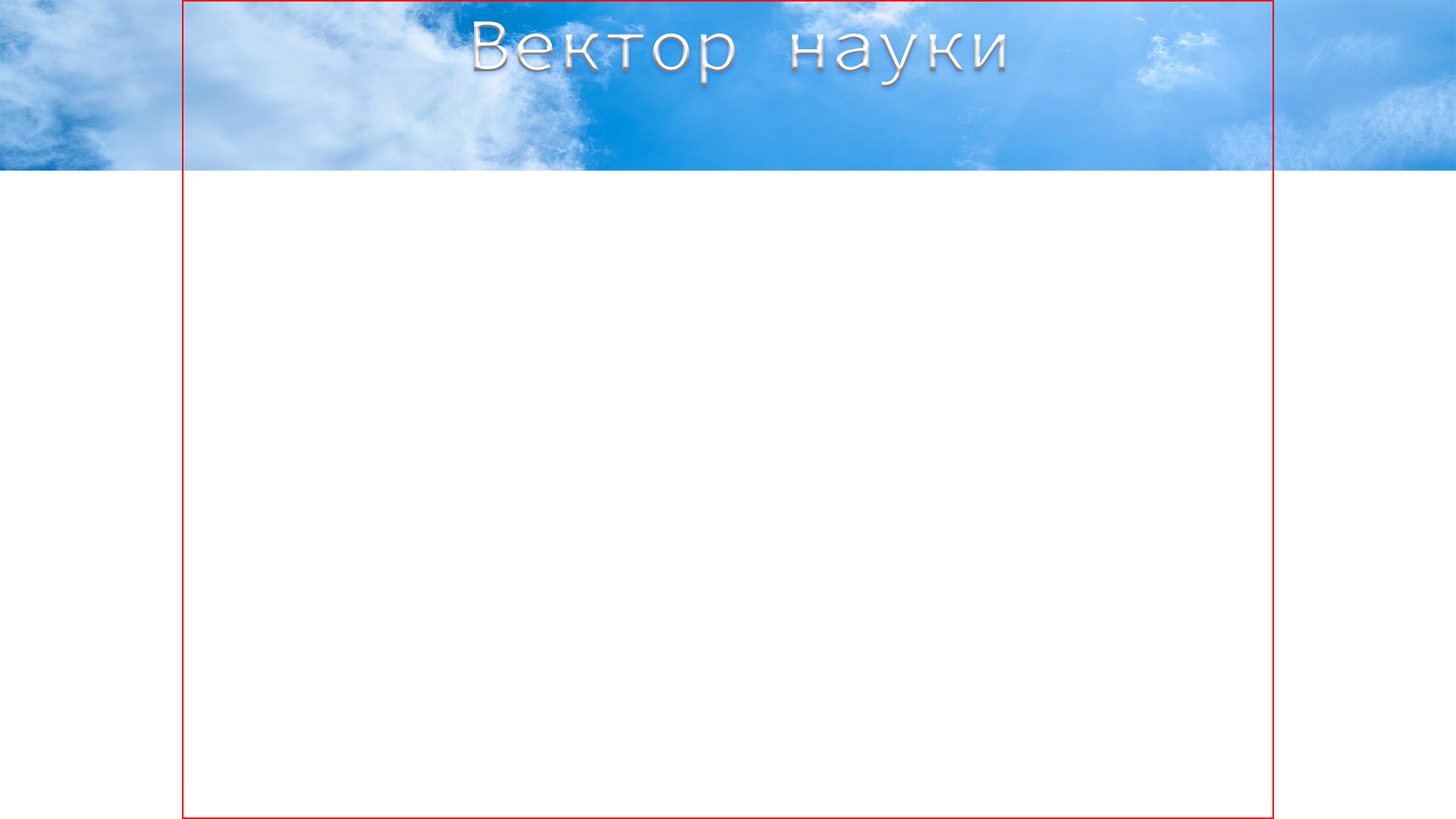
<style>
.page{position:relative;width:1456px;height:819px;background:#ffffff}
.page>*{position:absolute;margin:0}
.t1{font:75.8px "SourceCodeVariable-Roman"}
</style>
<div class="page">
<p class="t1" style="left:474px;top:21px;width:531px;height:66px">Вектор науки</p>
</div>
